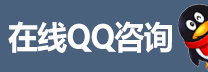
<style>
.page{position:relative;width:208px;height:72px;background:#49617c}
.page>*{position:absolute;margin:0}
.t1{font:32.1px "MicrosoftYaHei-Bold";letter-spacing:-0.02em;color:#ffffff;scale:0.93 1}
</style>
<div class="page">
<p class="t1" style="left:8px;top:21px;width:164px;height:32px">在线QQ咨询</p>
</div>
